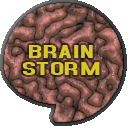
<style>
.page{position:relative;width:128px;height:128px;background:#ffffff}
.page>*{position:absolute;margin:0}
.t1{font:19.9px/17px "AccidentalPresidency";letter-spacing:0.02em;color:#d9c629;scale:1.86 1}
</style>
<div class="page">
<p class="t1" style="left:22px;top:45px;width:78px;height:30px;text-align:center">BRAIN<br>STORM</p>
</div>
